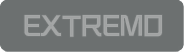
<style>
.page{position:relative;width:184px;height:52px;background:#6c7070}
.page>*{position:absolute;margin:0}
.t1{font:24px "KafuTechnoStd-HV";color:#a0a2a2;scale:0.92 1}
</style>
<div class="page">
<p class="t1" style="left:24px;top:15px;width:138px;height:22px">EXTREMO</p>
</div>
